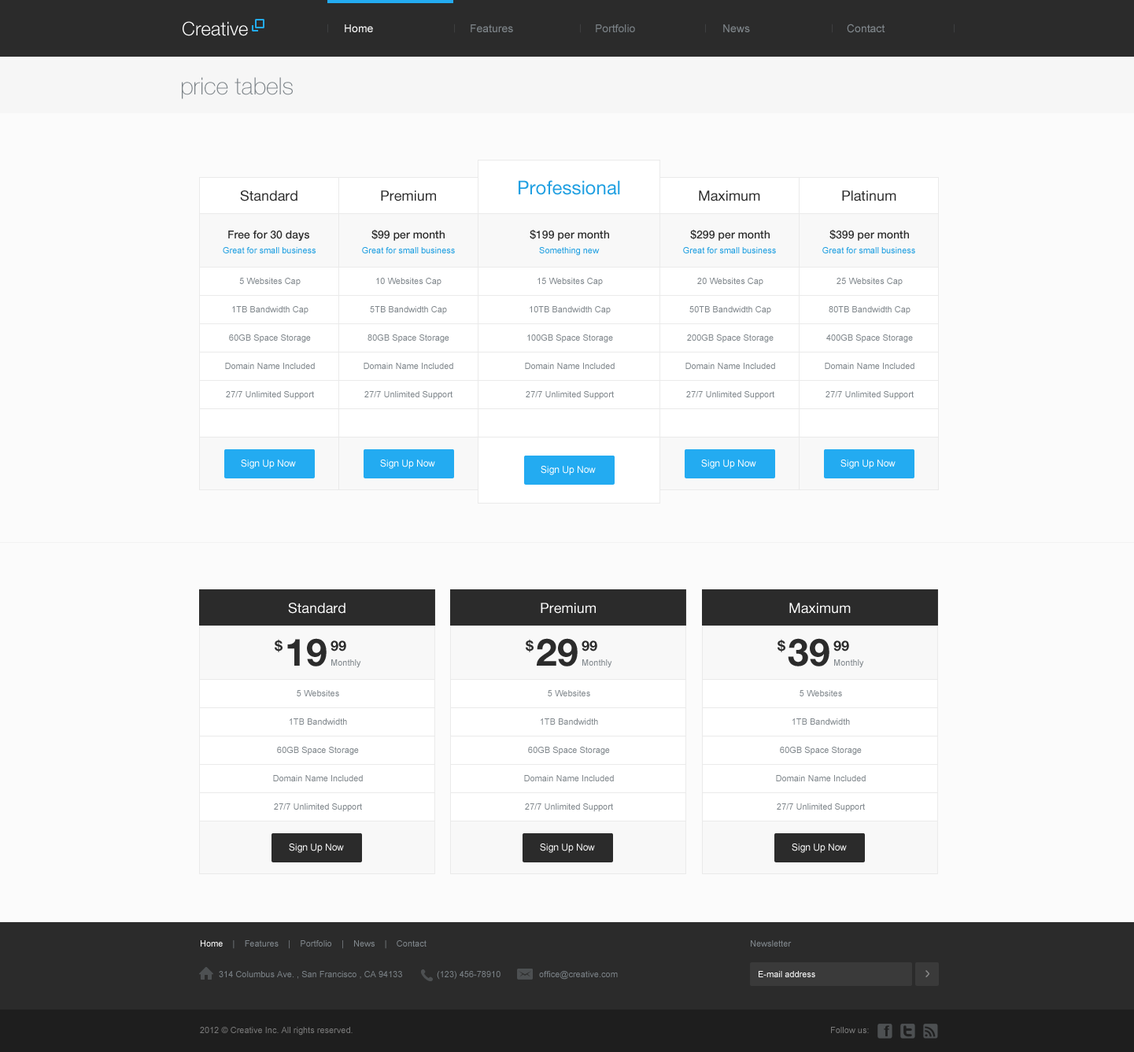
<style>
.page{position:relative;width:1134px;height:1052px;background:#fbfbfb}
.page>*{position:absolute;margin:0}
.t1{font:18.9px "HelveticaNeueLTStd-Lt";color:#ffffff}
.t2{font:8.2px "HelveticaNeueLTStd-Lt";scale:1.35 1}
.t3{font:11px "ArialMT";color:#ffffff}
.t4{font:11px "ArialMT";color:#80878c}
.t5{font:11px "ArialMT";color:#7a8186}
.t6{font:23.6px "HelveticaNeueLTStd-Th";color:#7a8186}
.t7{font:18.9px "HelveticaNeueLTStd-Roman";color:#1f9fe1}
.t8{font:14.2px "HelveticaNeueLTStd-Roman";color:#2b2b2b}
.t9{font:11px "HelveticaNeueLTStd-Md";color:#2b2b2b}
.t10{font:8.7px "ArialMT";color:#1f9fe1}
.t11{font:8.7px/28.3px "ArialMT";color:#80878c}
.t12{font:9.4px "ArialMT";color:#ffffff}
.t13{font:14.2px "HelveticaNeueLTStd-Roman";color:#ffffff}
.t14{font:14.2px "HelveticaNeueLTStd-Bd";color:#2b2b2b}
.t15{font:37.8px "HelveticaNeueLTStd-Bd";color:#2b2b2b}
.t16{font:8.7px "ArialMT";color:#80878c}
.t17{font:8.7px "ArialMT";color:#ffffff}
.t18{font:8.7px "ArialMT";color:#7a8186}
.t19{font:8.7px "ArialMT";color:#797979}
</style>
<div class="page">
<p class="t1" style="left:183px;top:21px;width:65px;height:15px">Creative</p>
<p class="t2" style="left:327px;top:24px;width:1px;height:9px">|</p>
<p class="t3" style="left:345px;top:24px;width:28px;height:8px">Home</p>
<p class="t2" style="left:454px;top:24px;width:1px;height:9px">|</p>
<p class="t4" style="left:470px;top:24px;width:43px;height:8px">Features</p>
<p class="t2" style="left:580px;top:24px;width:1px;height:9px">|</p>
<p class="t5" style="left:596px;top:24px;width:39px;height:8px">Portfolio</p>
<p class="t2" style="left:705px;top:24px;width:1px;height:9px">|</p>
<p class="t4" style="left:723px;top:24px;width:27px;height:8px">News</p>
<p class="t2" style="left:832px;top:24px;width:0px;height:9px">|</p>
<p class="t4" style="left:847px;top:24px;width:38px;height:9px">Contact</p>
<p class="t2" style="left:954px;top:24px;width:0px;height:9px">|</p>
<p class="t6" style="left:182px;top:77px;width:111px;height:22px">price tabels</p>
<p class="t7" style="left:518px;top:180px;width:102px;height:15px">Professional</p>
<p class="t8" style="left:240px;top:190px;width:57px;height:11px">Standard</p>
<p class="t8" style="left:381px;top:190px;width:55px;height:11px">Premium</p>
<p class="t8" style="left:699px;top:190px;width:61px;height:11px">Maximum</p>
<p class="t8" style="left:842px;top:190px;width:54px;height:11px">Platinum</p>
<p class="t9" style="left:228px;top:231px;width:81px;height:10px">Free for 30 days</p>
<p class="t9" style="left:371px;top:229px;width:73px;height:12px">$99 per month</p>
<p class="t9" style="left:529px;top:229px;width:80px;height:12px">$199 per month</p>
<p class="t9" style="left:690px;top:229px;width:79px;height:12px">$299 per month</p>
<p class="t9" style="left:829px;top:229px;width:80px;height:12px">$399 per month</p>
<p class="t10" style="left:223px;top:247px;width:92px;height:6px">Great for small business</p>
<p class="t10" style="left:362px;top:247px;width:93px;height:6px">Great for small business</p>
<p class="t10" style="left:539px;top:247px;width:60px;height:9px">Something new</p>
<p class="t10" style="left:683px;top:247px;width:93px;height:6px">Great for small business</p>
<p class="t10" style="left:822px;top:247px;width:93px;height:6px">Great for small business</p>
<p class="t11" style="left:225px;top:278px;width:90px;height:122px;text-align:center">5 Websites Cap<br>1TB Bandwidth Cap<br>60GB Space Storage<br>Domain Name Included<br>27/7 Unlimited Support</p>
<p class="t11" style="left:363px;top:278px;width:90px;height:122px;text-align:center">10 Websites Cap<br>5TB Bandwidth Cap<br>80GB Space Storage<br>Domain Name Included<br>27/7 Unlimited Support</p>
<p class="t11" style="left:525px;top:278px;width:89px;height:122px;text-align:center">15 Websites Cap<br>10TB Bandwidth Cap<br>100GB Space Storage<br>Domain Name Included<br>27/7 Unlimited Support</p>
<p class="t11" style="left:685px;top:278px;width:90px;height:122px;text-align:center">20 Websites Cap<br>50TB Bandwidth Cap<br>200GB Space Storage<br>Domain Name Included<br>27/7 Unlimited Support</p>
<p class="t11" style="left:824px;top:278px;width:90px;height:122px;text-align:center">25 Websites Cap<br>80TB Bandwidth Cap<br>400GB Space Storage<br>Domain Name Included<br>27/7 Unlimited Support</p>
<p class="t12" style="left:241px;top:459px;width:55px;height:10px">Sign Up Now</p>
<p class="t12" style="left:380px;top:459px;width:55px;height:10px">Sign Up Now</p>
<p class="t12" style="left:701px;top:459px;width:55px;height:10px">Sign Up Now</p>
<p class="t12" style="left:840px;top:459px;width:55px;height:10px">Sign Up Now</p>
<p class="t12" style="left:540px;top:466px;width:56px;height:9px">Sign Up Now</p>
<p class="t13" style="left:288px;top:603px;width:57px;height:11px">Standard</p>
<p class="t13" style="left:540px;top:603px;width:56px;height:11px">Premium</p>
<p class="t13" style="left:789px;top:603px;width:61px;height:11px">Maximum</p>
<p class="t14" style="left:275px;top:639px;width:7px;height:13px">$</p>
<p class="t15" style="left:287px;top:638px;width:39px;height:28px">19</p>
<p class="t14" style="left:330px;top:640px;width:16px;height:11px">99</p>
<p class="t14" style="left:526px;top:639px;width:7px;height:13px">$</p>
<p class="t15" style="left:537px;top:638px;width:40px;height:28px">29</p>
<p class="t14" style="left:581px;top:640px;width:16px;height:11px">99</p>
<p class="t14" style="left:777px;top:639px;width:8px;height:13px">$</p>
<p class="t15" style="left:788px;top:638px;width:41px;height:28px">39</p>
<p class="t14" style="left:833px;top:640px;width:16px;height:11px">99</p>
<p class="t16" style="left:331px;top:659px;width:30px;height:9px">Monthly</p>
<p class="t16" style="left:582px;top:659px;width:30px;height:9px">Monthly</p>
<p class="t16" style="left:834px;top:659px;width:30px;height:9px">Monthly</p>
<p class="t11" style="left:273px;top:690px;width:90px;height:122px;text-align:center">5 Websites<br>1TB Bandwidth<br>60GB Space Storage<br>Domain Name Included<br>27/7 Unlimited Support</p>
<p class="t11" style="left:524px;top:690px;width:90px;height:122px;text-align:center">5 Websites<br>1TB Bandwidth<br>60GB Space Storage<br>Domain Name Included<br>27/7 Unlimited Support</p>
<p class="t11" style="left:776px;top:690px;width:89px;height:122px;text-align:center">5 Websites<br>1TB Bandwidth<br>60GB Space Storage<br>Domain Name Included<br>27/7 Unlimited Support</p>
<p class="t12" style="left:289px;top:843px;width:55px;height:10px">Sign Up Now</p>
<p class="t12" style="left:540px;top:843px;width:55px;height:10px">Sign Up Now</p>
<p class="t12" style="left:791px;top:843px;width:56px;height:10px">Sign Up Now</p>
<p class="t16" style="left:201px;top:940px;width:225px;height:9px"><span class="t17">Home   </span> |    Features    |    Portfolio    |    News    |    Contact</p>
<p class="t16" style="left:751px;top:940px;width:40px;height:6px">Newsletter</p>
<p class="t18" style="left:219px;top:971px;width:183px;height:8px">314 Columbus Ave. , San Francisco , CA 94133</p>
<p class="t18" style="left:437px;top:971px;width:63px;height:8px">(123) 456-78910</p>
<p class="t18" style="left:539px;top:971px;width:79px;height:8px">office@creative.com</p>
<p class="t17" style="left:758px;top:971px;width:57px;height:6px">E-mail address</p>
<p class="t19" style="left:200px;top:1027px;width:152px;height:8px">2012 © Creative Inc. All rights reserved.</p>
<p class="t19" style="left:831px;top:1027px;width:38px;height:6px">Follow us:</p>
</div>
